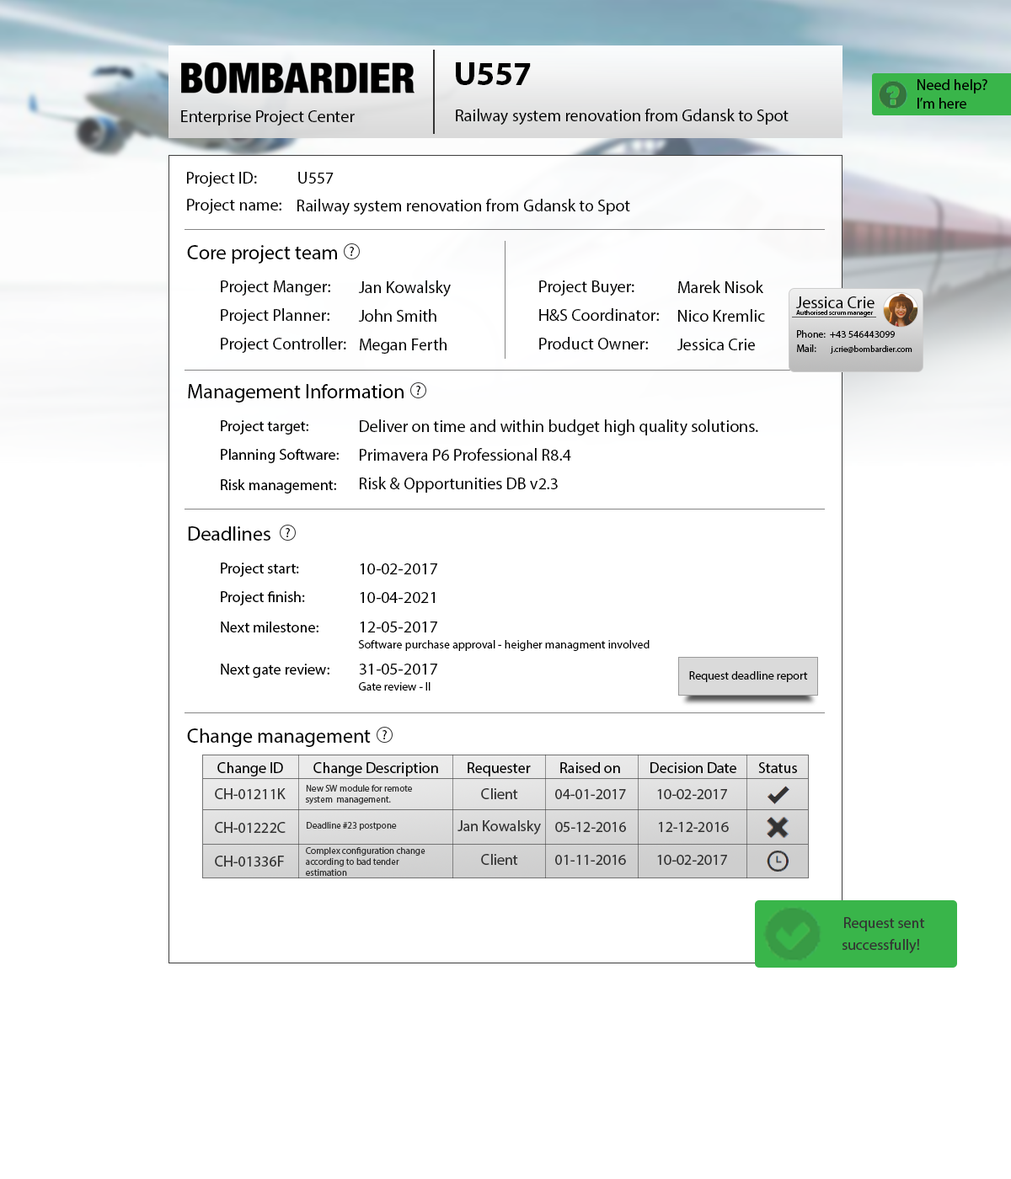
<style>
.page{position:relative;width:1011px;height:1179px;background:#ffffff}
.page>*{position:absolute;margin:0}
.t1{font:33.7px "MyriadPro-Bold";color:#000000}
.t2{font:15.2px "MyriadPro-Regular";color:#000000}
.t3{font:16.8px "MyriadPro-Regular";color:#000000}
.t4{font:20.2px "MyriadPro-Regular";color:#000000}
.t5{font:13.5px "MyriadPro-Regular";color:#000000}
.t6{font:6.7px "MyriadPro-Regular";color:#000000}
.t7{font:10.1px "MyriadPro-Regular";color:#000000}
.t8{font:8.4px "MyriadPro-Regular";color:#000000}
.t9{font:11.8px "MyriadPro-Regular";color:#000000}
.t10{font:9.3px "MyriadPro-Regular";color:#333333}
.t11{font:15.2px "MyriadPro-Regular";color:#333333}
</style>
<div class="page">
<p class="t1" style="left:456px;top:62px;width:75px;height:23px">U557</p>
<p class="t2" style="left:917px;top:79px;width:70px;height:15px">Need help?</p>
<p class="t2" style="left:917px;top:98px;width:49px;height:11px">I’m here</p>
<p class="t3" style="left:181px;top:110px;width:174px;height:16px">Enterprise Project Center</p>
<p class="t3" style="left:456px;top:109px;width:333px;height:16px">Railway system renovation from Gdansk to Spot</p>
<p class="t3" style="left:187px;top:172px;width:70px;height:15px">Project ID:</p>
<p class="t3" style="left:298px;top:172px;width:36px;height:12px">U557</p>
<p class="t3" style="left:187px;top:199px;width:94px;height:15px">Project name:</p>
<p class="t3" style="left:297px;top:199px;width:333px;height:16px">Railway system renovation from Gdansk to Spot</p>
<p class="t4" style="left:187px;top:245px;width:150px;height:19px">Core project team</p>
<p class="t5" style="left:350px;top:247px;width:4px;height:9px">?</p>
<p class="t3" style="left:221px;top:281px;width:109px;height:15px">Project Manger:</p>
<p class="t3" style="left:358px;top:281px;width:93px;height:16px">Jan Kowalsky</p>
<p class="t3" style="left:539px;top:281px;width:95px;height:15px">Project Buyer:</p>
<p class="t3" style="left:678px;top:281px;width:85px;height:12px">Marek Nisok</p>
<p class="t3" style="left:795px;top:297px;width:79px;height:11px">Jessica Crie</p>
<p class="t3" style="left:221px;top:308px;width:108px;height:16px">Project Planner:</p>
<p class="t3" style="left:358px;top:309px;width:78px;height:13px">John Smith</p>
<p class="t3" style="left:539px;top:308px;width:120px;height:13px">H&amp;S Coordinator:</p>
<p class="t3" style="left:678px;top:309px;width:87px;height:13px">Nico Kremlic</p>
<p class="t6" style="left:796px;top:310px;width:78px;height:7px">Authorised scrum manager</p>
<p class="t3" style="left:221px;top:337px;width:125px;height:16px">Project Controller:</p>
<p class="t3" style="left:360px;top:338px;width:87px;height:16px">Megan Ferth</p>
<p class="t3" style="left:539px;top:337px;width:109px;height:13px">Product Owner:</p>
<p class="t3" style="left:677px;top:339px;width:78px;height:11px">Jessica Crie</p>
<p class="t7" style="left:797px;top:330px;width:98px;height:8px">Phone:  +43 546443099</p>
<p class="t8" style="left:797px;top:345px;width:115px;height:9px"><span class="t7">Mail:       </span>j.crie@bombardier.com</p>
<p class="t4" style="left:188px;top:384px;width:216px;height:19px">Management Information</p>
<p class="t5" style="left:416px;top:386px;width:4px;height:9px">?</p>
<p class="t2" style="left:221px;top:420px;width:87px;height:15px">Project target:</p>
<p class="t3" style="left:360px;top:420px;width:398px;height:16px">Deliver on time and within budget high quality solutions.</p>
<p class="t2" style="left:221px;top:449px;width:118px;height:14px">Planning Software:</p>
<p class="t3" style="left:360px;top:448px;width:211px;height:13px">Primavera P6 Professional R8.4</p>
<p class="t2" style="left:221px;top:479px;width:115px;height:15px">Risk management:</p>
<p class="t3" style="left:360px;top:477px;width:198px;height:16px">Risk &amp; Opportunities DB v2.3</p>
<p class="t4" style="left:188px;top:527px;width:82px;height:14px">Deadlines</p>
<p class="t5" style="left:286px;top:528px;width:4px;height:10px">?</p>
<p class="t2" style="left:221px;top:563px;width:78px;height:14px">Project start:</p>
<p class="t3" style="left:360px;top:564px;width:77px;height:11px">10-02-2017</p>
<p class="t2" style="left:221px;top:591px;width:84px;height:15px">Project finish:</p>
<p class="t3" style="left:360px;top:592px;width:75px;height:11px">10-04-2021</p>
<p class="t2" style="left:221px;top:622px;width:97px;height:11px">Next milestone:</p>
<p class="t3" style="left:360px;top:622px;width:77px;height:11px">12-05-2017</p>
<p class="t9" style="left:358px;top:640px;width:292px;height:11px">Software purchase approval - heigher managment involved</p>
<p class="t2" style="left:221px;top:664px;width:108px;height:14px">Next gate review:</p>
<p class="t3" style="left:359px;top:664px;width:78px;height:11px">31-05-2017</p>
<p class="t9" style="left:689px;top:671px;width:119px;height:11px">Request deadline report</p>
<p class="t9" style="left:359px;top:682px;width:72px;height:9px">Gate review - II</p>
<p class="t4" style="left:187px;top:729px;width:184px;height:18px">Change management</p>
<p class="t5" style="left:382px;top:730px;width:5px;height:10px">?</p>
<p class="t2" style="left:217px;top:762px;width:66px;height:15px">Change ID</p>
<p class="t2" style="left:313px;top:762px;width:125px;height:15px">Change Description</p>
<p class="t2" style="left:468px;top:762px;width:63px;height:15px">Requester</p>
<p class="t2" style="left:560px;top:762px;width:60px;height:11px">Raised on</p>
<p class="t2" style="left:650px;top:762px;width:86px;height:11px">Decision Date</p>
<p class="t2" style="left:758px;top:762px;width:39px;height:11px">Status</p>
<p class="t10" style="left:305px;top:785px;width:107px;height:20px">New SW module for remote <br>system  management.</p>
<p class="t11" style="left:215px;top:789px;width:71px;height:11px">CH-01211K</p>
<p class="t11" style="left:481px;top:789px;width:37px;height:11px">Client</p>
<p class="t11" style="left:555px;top:789px;width:71px;height:11px">04-01-2017</p>
<p class="t11" style="left:657px;top:789px;width:70px;height:11px">10-02-2017</p>
<p class="t11" style="left:457px;top:821px;width:84px;height:14px">Jan Kowalsky</p>
<p class="t11" style="left:215px;top:822px;width:71px;height:11px">CH-01222C</p>
<p class="t10" style="left:307px;top:822px;width:90px;height:9px">Deadline #23 postpone</p>
<p class="t11" style="left:555px;top:822px;width:71px;height:10px">05-12-2016</p>
<p class="t11" style="left:659px;top:822px;width:70px;height:10px">12-12-2016</p>
<p class="t11" style="left:215px;top:856px;width:69px;height:11px">CH-01336F</p>
<p class="t10" style="left:306px;top:848px;width:119px;height:28px">Complex configuration change <br>according to bad tender <br>estimation</p>
<p class="t11" style="left:481px;top:854px;width:37px;height:11px">Client</p>
<p class="t11" style="left:555px;top:855px;width:71px;height:10px">01-11-2016</p>
<p class="t11" style="left:657px;top:855px;width:70px;height:10px">10-02-2017</p>
<p class="t11" style="left:842px;top:917px;width:83px;height:37px">Request sent <br>successfully!</p>
</div>
